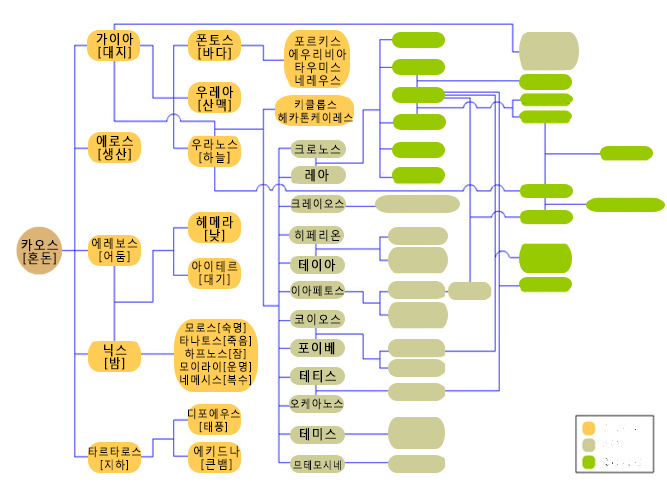
<style>
.page{position:relative;width:667px;height:492px;background:#ffffff}
.page>*{position:absolute;margin:0}
.t1{font:13px/13px "MalgunGothicRegular";letter-spacing:0.08em;color:#000000;font-weight:bold;scale:0.9 1}
.t2{font:12px/13px "MalgunGothicRegular";letter-spacing:0.08em;color:#000000;font-weight:bold;scale:0.9 1}
.t3{font:11px/13px "MalgunGothicRegular";letter-spacing:0.08em;color:#000000;font-weight:bold;scale:0.9 1}
.t4{font:12px "MalgunGothicRegular";letter-spacing:0.08em;color:#000000;font-weight:bold;scale:0.9 1}
.t5{font:13px "MalgunGothicRegular";letter-spacing:0.08em;color:#000000;font-weight:bold;scale:0.9 1}
.t6{font:11px "MalgunGothicRegular";letter-spacing:0.08em;color:#000000;font-weight:bold;scale:0.9 1}
.t7{font:10px "MalgunGothicRegular";letter-spacing:0.08em;color:#000000;font-weight:bold;scale:0.9 1}
</style>
<div class="page">
<p class="t1" style="left:96px;top:33px;width:38px;height:26px;text-align:center">가이아<br>[대지]</p>
<p class="t1" style="left:196px;top:34px;width:37px;height:26px;text-align:center">폰토스<br>[바다]</p>
<p class="t2" style="left:289px;top:35px;width:58px;height:52px;text-align:center">포르키스<br>에우리비아<br>타우미스<br>네레우스</p>
<p class="t1" style="left:196px;top:86px;width:38px;height:26px;text-align:center">우레아<br>[산맥]</p>
<p class="t3" style="left:278px;top:99px;width:75px;height:25px;text-align:center">키클롭스<br>헤카톤케이레스</p>
<p class="t1" style="left:96px;top:135px;width:37px;height:26px;text-align:center">에로스<br>[생산]</p>
<p class="t2" style="left:191px;top:138px;width:47px;height:26px;text-align:center">우라노스<br>[하늘<span class="t1">]</span></p>
<p class="t4" style="left:294px;top:144px;width:47px;height:10px">크로노스</p>
<p class="t5" style="left:305px;top:169px;width:24px;height:13px">레아</p>
<p class="t6" style="left:291px;top:198px;width:53px;height:12px">크레이오스</p>
<p class="t1" style="left:196px;top:216px;width:38px;height:26px;text-align:center">헤메라<br>[낮]</p>
<p class="t4" style="left:295px;top:229px;width:46px;height:13px">히페리온</p>
<p class="t1" style="left:21px;top:239px;width:37px;height:26px;text-align:center">카오스<br>[혼돈]</p>
<p class="t2" style="left:92px;top:237px;width:46px;height:26px;text-align:center">에레보스<br>[어둠]</p>
<p class="t2" style="left:192px;top:260px;width:46px;height:26px;text-align:center">아이테르<br>[대기]</p>
<p class="t5" style="left:299px;top:259px;width:37px;height:13px">테이아</p>
<p class="t6" style="left:291px;top:285px;width:53px;height:12px">이아페토스</p>
<p class="t4" style="left:294px;top:313px;width:47px;height:13px">코이오스</p>
<p class="t3" style="left:179px;top:322px;width:72px;height:64px;text-align:center">모로스[숙명]<br>타나토스[죽음]<br>하프노스[잠]<br>모이라이[운명]<br>네메시스[복수]</p>
<p class="t5" style="left:298px;top:342px;width:37px;height:13px">포이베</p>
<p class="t1" style="left:104px;top:344px;width:23px;height:26px;text-align:center">닉스<br>[밤]</p>
<p class="t5" style="left:300px;top:370px;width:36px;height:13px">테티스</p>
<p class="t6" style="left:290px;top:398px;width:53px;height:12px">오케아노스</p>
<p class="t3" style="left:188px;top:408px;width:52px;height:25px;text-align:center">디포에우스<br>[태풍]</p>
<p class="t5" style="left:300px;top:428px;width:36px;height:13px">테미스</p>
<p class="t3" style="left:88px;top:446px;width:53px;height:25px;text-align:center">타르타로스<br>[지하]</p>
<p class="t2" style="left:194px;top:445px;width:46px;height:26px;text-align:center">에키드나<br>[큰뱀]</p>
<p class="t7" style="left:293px;top:460px;width:48px;height:10px">므테모시네</p>
</div>
